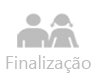
<style>
.page{position:relative;width:96px;height:80px;background:#ffffff}
.page>*{position:absolute;margin:0}
.t1{font:18px "SegoeUI";color:#bdbdbd}
</style>
<div class="page">
<p class="t1" style="left:6px;top:55px;width:85px;height:18px">Finalização</p>
</div>
